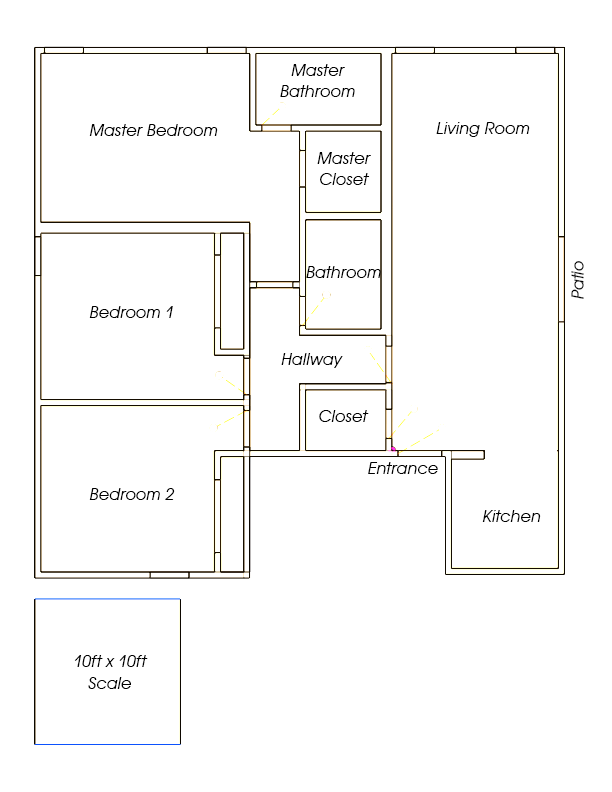
<style>
.page{position:relative;width:612px;height:792px;background:#ffffff}
.page>*{position:absolute;margin:0}
.t1{font:18px "AvantGardeITCTTBookOblique";color:#000000}
</style>
<div class="page">
<p class="t1" style="left:280px;top:64px;width:75px;height:33px;text-align:center">Master<br>Bathroom</p>
<p class="t1" style="left:89px;top:124px;width:129px;height:12px">Master Bedroom</p>
<p class="t1" style="left:436px;top:122px;width:94px;height:15px">Living Room</p>
<p class="t1" style="left:317px;top:152px;width:54px;height:33px;text-align:center">Master<br>Closet</p>
<p class="t1" style="left:306px;top:266px;width:75px;height:12px">Bathroom</p>
<p class="t1" style="left:571px;top:261px;width:13px;height:38px;rotate:-90deg">Patio</p>
<p class="t1" style="left:89px;top:306px;width:84px;height:12px">Bedroom 1</p>
<p class="t1" style="left:281px;top:353px;width:62px;height:15px">Hallway</p>
<p class="t1" style="left:319px;top:410px;width:50px;height:12px">Closet</p>
<p class="t1" style="left:368px;top:462px;width:70px;height:12px">Entrance</p>
<p class="t1" style="left:89px;top:488px;width:86px;height:12px">Bedroom 2</p>
<p class="t1" style="left:482px;top:510px;width:59px;height:12px">Kitchen</p>
<p class="t1" style="left:74px;top:655px;width:74px;height:34px;text-align:center">10ft x 10ft<br>Scale</p>
</div>
